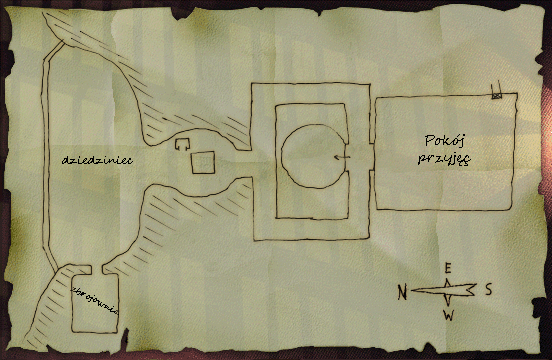
<style>
.page{position:relative;width:552px;height:360px}
.page>*{position:absolute;margin:0}
.t1{font:14px "SegoeScript";color:#000000}
.t2{font:11px "SegoeScript";color:#000000}
.t3{font:9px "SegoeScript";color:#000000}
</style>
<div class="page">
<p class="t1" style="left:418px;top:134px;width:53px;height:32px;text-align:center">Pokój <br>przyjęć</p>
<p class="t2" style="left:62px;top:156px;width:71px;height:8px">dziedziniec</p>
<p class="t3" style="left:70px;top:287px;width:49px;height:28px;rotate:28deg">zbrojownia</p>
</div>
